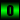
<style>
.page{position:relative;width:20px;height:20px;background:#000000}
.page>*{position:absolute;margin:0}
.t1{font:14px "Impact";color:#000000}
</style>
<div class="page">
<p class="t1" style="left:7px;top:5px;width:7px;height:11px">0</p>
</div>
